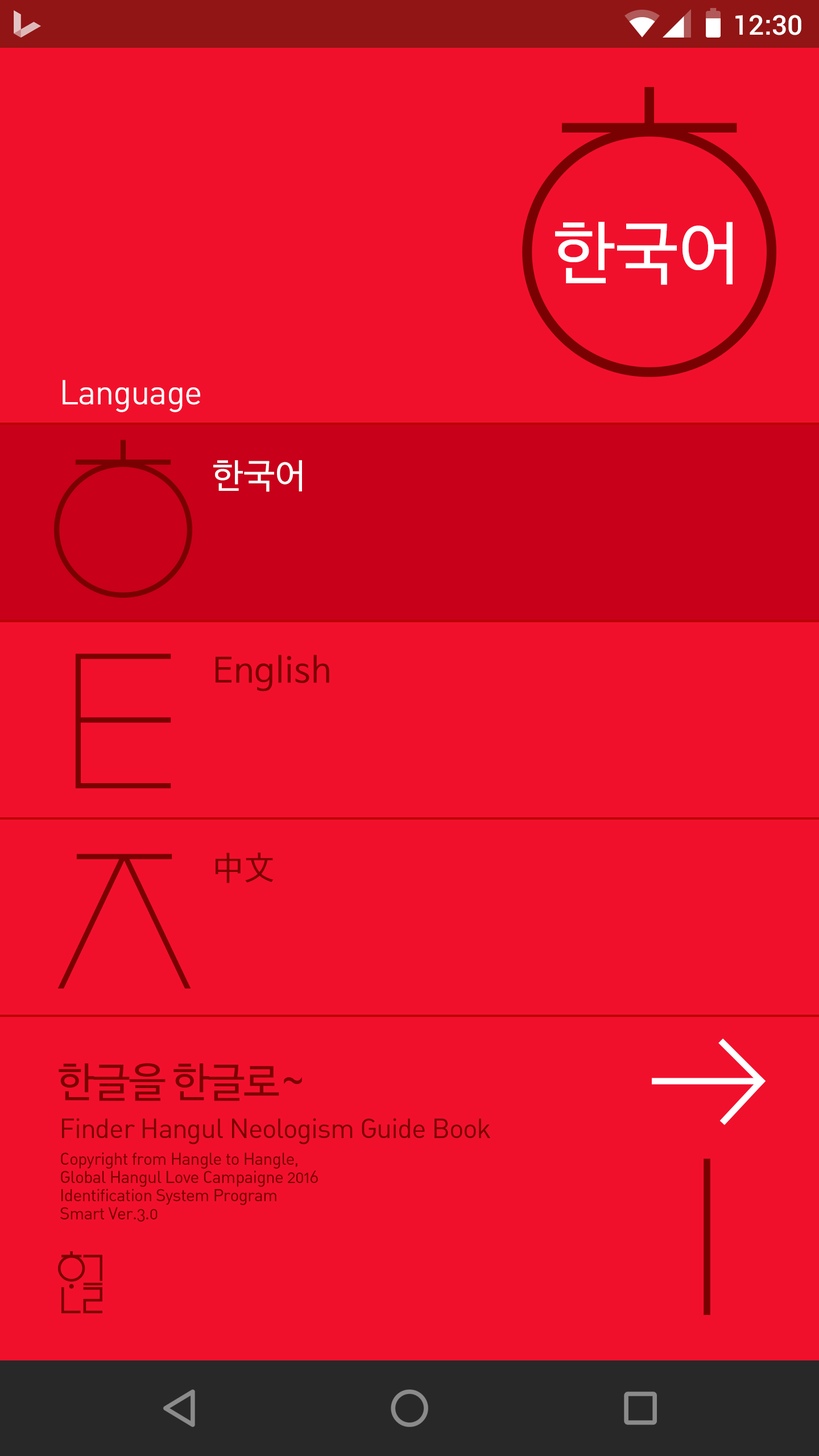
<style>
.page{position:relative;width:819px;height:1456px;background:#f1102c}
.page>*{position:absolute;margin:0}
.t1{font:27.3px "Roboto-Medium";color:#ffffff}
.t2{font:68.2px "NanumBarunGothic";letter-spacing:0.025em;color:#ffffff}
.t3{font:34.1px "DINAlternate-Regular";letter-spacing:-0.025em;color:#ffffff}
.t4{font:34.1px "NanumBarunGothic";letter-spacing:0.025em;color:#fefefe}
.t5{font:34.1px "NanumBarunGothic";letter-spacing:0.025em;color:#790101}
.t6{font:40.9px "NanumBarunGothic";letter-spacing:-0.025em;color:#790101}
.t7{font:27.3px "DINAlternate-Regular";letter-spacing:-0.025em;color:#790101}
.t8{font:17.1px/18.2px "DINAlternate-Regular";letter-spacing:-0.025em;color:#710000}
</style>
<div class="page">
<p class="t1" style="left:735px;top:15px;width:66px;height:20px">12:30</p>
<p class="t2" style="left:555px;top:222px;width:178px;height:63px">한국어</p>
<p class="t3" style="left:63px;top:380px;width:137px;height:32px">Language</p>
<p class="t4" style="left:213px;top:460px;width:89px;height:32px">한국어</p>
<p class="t5" style="left:216px;top:655px;width:113px;height:37px">English</p>
<p class="t5" style="left:216px;top:853px;width:57px;height:30px">中文</p>
<p class="t6" style="left:59px;top:1063px;width:243px;height:38px">한글을 한글로~</p>
<p class="t7" style="left:62px;top:1118px;width:428px;height:26px">Finder Hangul Neologism Guide Book</p>
<p class="t8" style="left:60px;top:1152px;width:258px;height:70px">Copyright from Hangle to Hangle,<br>Global Hangul Love Campaigne 2016<br>Identification System Program <br>Smart Ver.3.0</p>
</div>
